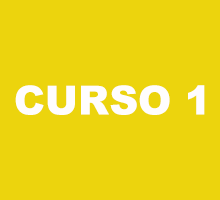
<style>
.page{position:relative;width:220px;height:200px;background:#ecd40d}
.page>*{position:absolute;margin:0}
.t1{font:40px "Arial-Black";color:#fffdfd}
</style>
<div class="page">
<p class="t1" style="left:15px;top:85px;width:190px;height:30px">CURSO 1</p>
</div>
